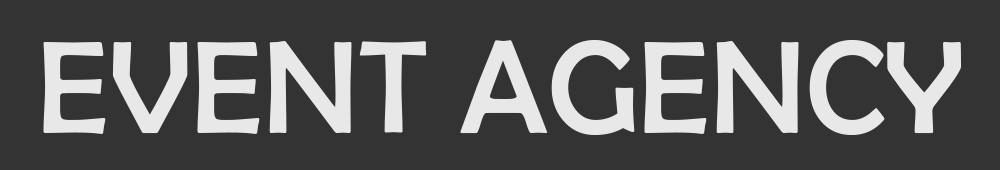
<style>
.page{position:relative;width:1000px;height:170px;background:#333333}
.page>*{position:absolute;margin:0}
.t1{font:133.3px "BerlinSansFB-Reg";color:#e8e8e8}
</style>
<div class="page">
<p class="t1" style="left:43px;top:40px;width:919px;height:95px">EVENT AGENCY</p>
</div>
